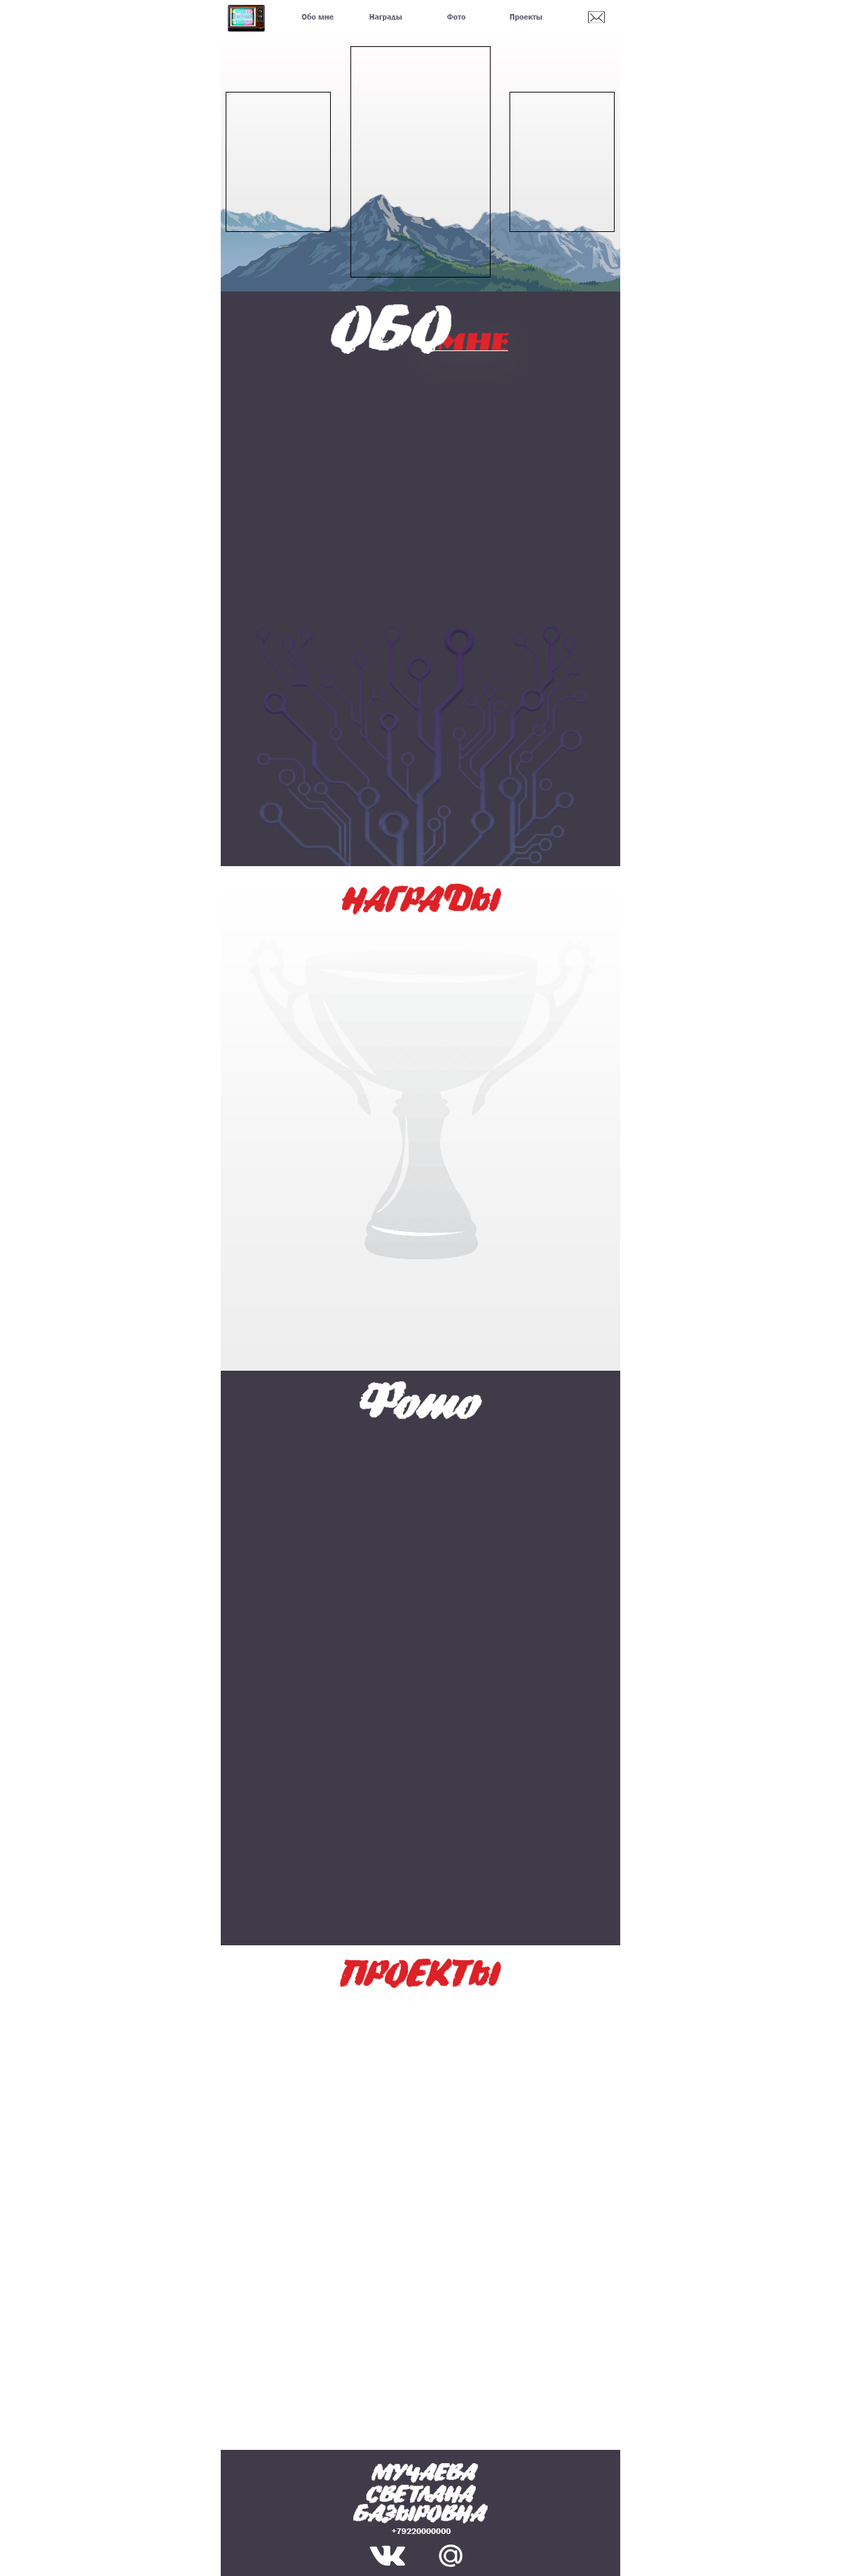
<style>
.page{position:relative;width:841px;height:2576px;background:#ffffff}
.page>*{position:absolute;margin:0}
.t1{font:8.4px "FranklinGothic-Demi";color:#5e6072}
.t2{font:8.4px "FranklinGothic-Demi";color:#ffffff}
</style>
<div class="page">
<p class="t1" style="left:301px;top:13px;width:33px;height:7px">Обо мне</p>
<p class="t1" style="left:369px;top:14px;width:33px;height:7px">Награды</p>
<p class="t1" style="left:447px;top:14px;width:18px;height:6px">Фото</p>
<p class="t1" style="left:509px;top:14px;width:33px;height:7px">Проекты</p>
<p class="t2" style="left:392px;top:2528px;width:59px;height:6px">+79220000000</p>
</div>
